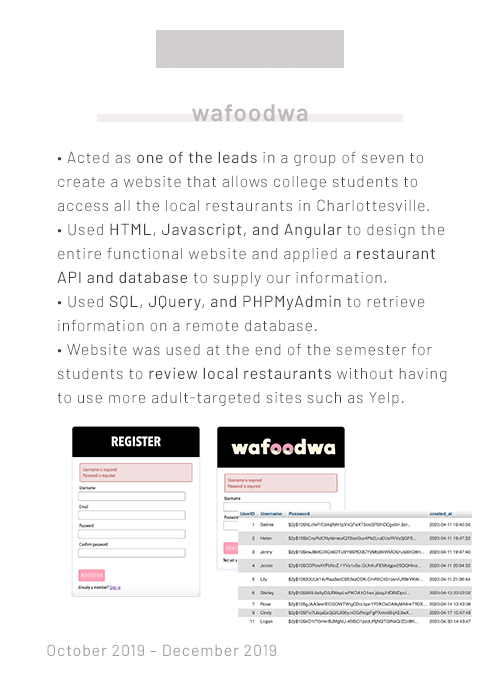
<style>
.page{position:relative;width:500px;height:684px;background:#ffffff}
.page>*{position:absolute;margin:0}
.t1{font:24px "Barlow-SemiBold";letter-spacing:0.05em;color:#c1b9b9}
.t2{font:16px/24px "Barlow-Light";letter-spacing:0.05em;color:#414141}
.t3{font:16px/24px "Barlow-Regular";letter-spacing:0.05em;color:#414141}
.t4{font:16px "Barlow-Regular";letter-spacing:0.05em;color:#a1a1a1}
</style>
<div class="page">
<p class="t1" style="left:192px;top:104px;width:116px;height:18px">wafoodwa</p>
<p class="t2" style="left:57px;top:151px;width:390px;height:256px">• Acted as <span class="t3">one of the leads</span> in a group of seven to create a website that allows college students to access all the local restaurants in Charlottesville.<br>• Used <span class="t3">HTML, Javascript, and Angular</span> to design the entire functional website and applied a <span class="t3">restaurant API and database</span> to supply our information.<br>• Used <span class="t3">SQL, JQuery, and PHPMyAdmin</span> to retrieve information on a remote database.<br>• Website was used at the end of the semester for students to <span class="t3">review local restaurants</span> without having to use more adult-targeted sites such as Yelp.</p>
<p class="t4" style="left:47px;top:644px;width:229px;height:13px">October 2019 – December 2019</p>
</div>
